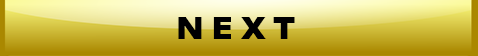
<style>
.page{position:relative;width:478px;height:56px}
.page>*{position:absolute;margin:0}
.t1{font:30px "Moire-ExtraBold";color:#000001}
</style>
<div class="page">
<p class="t1" style="left:178px;top:17px;width:117px;height:22px">N E X T</p>
</div>
